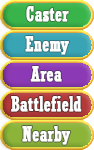
<style>
.page{position:relative;width:94px;height:150px}
.page>*{position:absolute;margin:0}
.t1{font:20px "Rockwell-Condensed";color:#ffffff;font-weight:bold}
</style>
<div class="page">
<p class="t1" style="left:26px;top:6px;width:43px;height:16px">Caster</p>
<p class="t1" style="left:25px;top:36px;width:44px;height:19px">Enemy</p>
<p class="t1" style="left:30px;top:66px;width:32px;height:16px">Area</p>
<p class="t1" style="left:11px;top:96px;width:71px;height:16px">Battlefield</p>
<p class="t1" style="left:22px;top:126px;width:49px;height:19px">Nearby</p>
</div>
